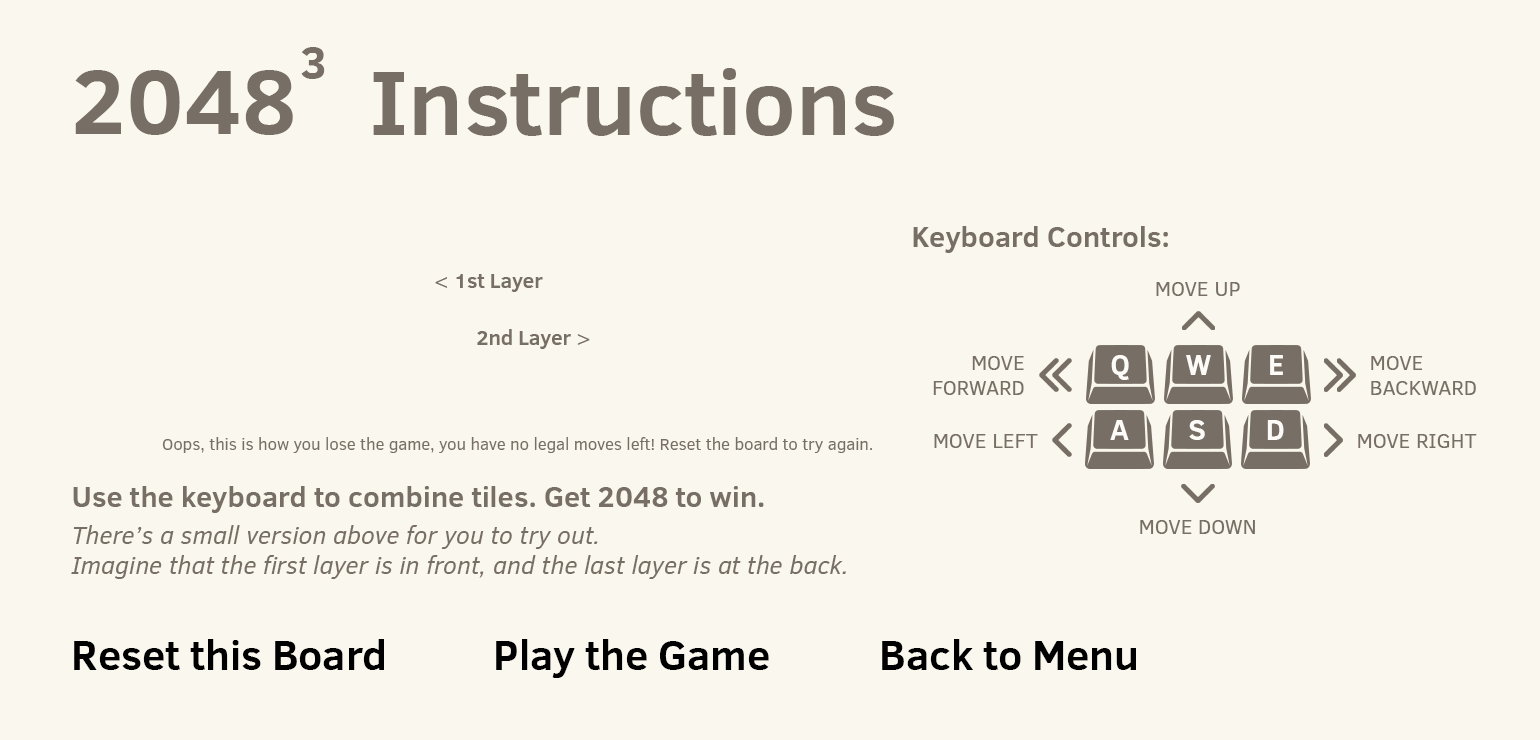
<style>
.page{position:relative;width:1540px;height:740px;background:#faf7ee}
.page>*{position:absolute;margin:0}
.t1{font:47.5px "ClearSans-Bold";color:#776e65}
.t2{font:92.8px "ClearSans-Bold";color:#776e65}
.t3{font:29.2px "ClearSans-Bold";color:#776e65}
.t4{font:20.8px "ClearSans-Bold";color:#776e65}
.t5{font:20.8px "ClearSans";color:#776e65}
.t6{font:29.2px "ClearSans-Bold";color:#fdfbf7}
.t7{font:16.7px "ClearSans";color:#776e65}
.t8{font:25px "ClearSans-Italic";color:#776e65}
.t9{font:41.7px "ClearSans-Bold";color:#000000}
</style>
<div class="page">
<p class="t1" style="left:301px;top:47px;width:24px;height:32px">3</p>
<p class="t2" style="left:75px;top:70px;width:218px;height:65px">2048</p>
<p class="t2" style="left:373px;top:68px;width:521px;height:68px">Instructions</p>
<p class="t3" style="left:913px;top:226px;width:255px;height:27px">Keyboard Controls:</p>
<p class="t4" style="left:435px;top:274px;width:108px;height:18px"><span class="t5">&lt; </span>1st Layer</p>
<p class="t5" style="left:1156px;top:282px;width:84px;height:14px">MOVE UP</p>
<p class="t4" style="left:477px;top:329px;width:113px;height:20px">2nd Layer <span class="t5">&gt;</span></p>
<p class="t5" style="left:933px;top:356px;width:91px;height:39px;text-align:right">MOVE<br>FORWARD</p>
<p class="t6" style="left:1111px;top:355px;width:18px;height:25px">Q</p>
<p class="t6" style="left:1186px;top:355px;width:25px;height:20px">W</p>
<p class="t6" style="left:1270px;top:355px;width:13px;height:20px">E</p>
<p class="t5" style="left:1371px;top:356px;width:105px;height:39px">MOVE<br>BACKWARD</p>
<p class="t6" style="left:1110px;top:420px;width:19px;height:20px">A</p>
<p class="t6" style="left:1189px;top:420px;width:16px;height:20px">S</p>
<p class="t6" style="left:1267px;top:420px;width:17px;height:20px">D</p>
<p class="t7" style="left:162px;top:437px;width:710px;height:16px">Oops, this is how you lose the game, you have no legal moves left! Reset the board to try again.</p>
<p class="t5" style="left:934px;top:434px;width:104px;height:14px">MOVE LEFT</p>
<p class="t5" style="left:1358px;top:434px;width:119px;height:14px">MOVE RIGHT</p>
<p class="t3" style="left:73px;top:486px;width:691px;height:27px">Use the keyboard to combine tiles. Get 2048 to win.</p>
<p class="t5" style="left:1140px;top:520px;width:115px;height:14px">MOVE DOWN</p>
<p class="t8" style="left:71px;top:525px;width:775px;height:54px">There’s a small version above for you to try out. <br>Imagine that the first layer is in front, and the last layer is at the back.</p>
<p class="t9" style="left:74px;top:639px;width:310px;height:31px">Reset this Board</p>
<p class="t9" style="left:496px;top:639px;width:273px;height:39px">Play the Game</p>
<p class="t9" style="left:882px;top:639px;width:254px;height:31px">Back to Menu</p>
</div>
